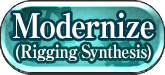
<style>
.page{position:relative;width:165px;height:75px}
.page>*{position:absolute;margin:0}
.t1{font:34px "RyuminPro-ExBold";letter-spacing:-0.04em;color:#ffffff;scale:0.9 1}
.t2{font:18px "RyuminPro-ExBold";letter-spacing:-0.04em;color:#ffffff;scale:0.9 1}
</style>
<div class="page">
<p class="t1" style="left:13px;top:12px;width:141px;height:27px">Modernize</p>
<p class="t2" style="left:16px;top:44px;width:135px;height:17px"><span class="t1"><br></span>(Rigging Synthesis)</p>
</div>
